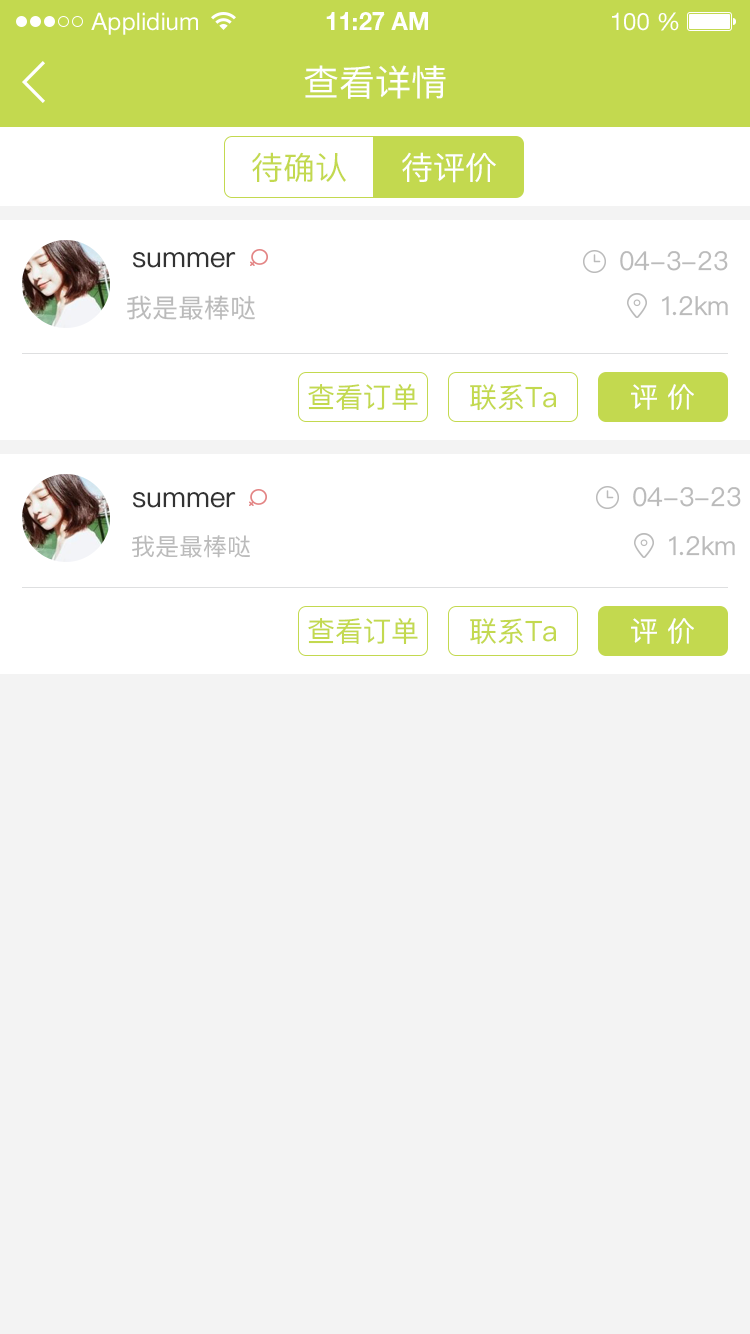
<style>
.page{position:relative;width:750px;height:1334px;background:#f3f3f3}
.page>*{position:absolute;margin:0}
.t1{font:24px "HelveticaNeueLTStd-Roman";color:#ffffff}
.t2{font:24px "HelveticaNeueLTStd-Bd";color:#ffffff}
.t3{font:36px "PingFangSC-Regular";color:#ffffff}
.t4{font:32px "PingFangSC-Regular";color:#c3d94f}
.t5{font:32px "PingFangSC-Regular";color:#ffffff}
.t6{font:28px "PingFangSC-Regular";color:#333333}
.t7{font:26px "PingFangSC-Regular";color:#bbbbbb}
.t8{font:28px "PingFangSC-Regular";color:#c3d94f}
.t9{font:28px "PingFangSC-Regular";color:#ffffff}
.t10{font:24px "PingFangSC-Regular";color:#bbbbbb}
</style>
<div class="page">
<p class="t1" style="left:91px;top:12px;width:107px;height:23px">Applidium</p>
<p class="t2" style="left:326px;top:12px;width:102px;height:18px">11:27 AM</p>
<p class="t1" style="left:612px;top:12px;width:67px;height:19px">100 %</p>
<p class="t3" style="left:304px;top:65px;width:142px;height:34px">查看详情</p>
<p class="t4" style="left:252px;top:152px;width:94px;height:30px">待确认</p>
<p class="t5" style="left:402px;top:152px;width:94px;height:31px">待评价</p>
<p class="t6" style="left:132px;top:252px;width:104px;height:16px">summer</p>
<p class="t7" style="left:620px;top:251px;width:108px;height:20px">04-3-23</p>
<p class="t7" style="left:127px;top:295px;width:128px;height:25px">我是最棒哒</p>
<p class="t7" style="left:662px;top:296px;width:66px;height:20px">1.2km</p>
<p class="t8" style="left:308px;top:383px;width:110px;height:27px">查看订单</p>
<p class="t8" style="left:470px;top:384px;width:86px;height:27px">联系Ta</p>
<p class="t9" style="left:631px;top:384px;width:63px;height:26px">评 价</p>
<p class="t6" style="left:132px;top:492px;width:104px;height:16px">summer</p>
<p class="t7" style="left:633px;top:487px;width:108px;height:20px">04-3-23</p>
<p class="t10" style="left:132px;top:535px;width:118px;height:23px">我是最棒哒</p>
<p class="t7" style="left:669px;top:536px;width:66px;height:20px">1.2km</p>
<p class="t8" style="left:308px;top:617px;width:110px;height:27px">查看订单</p>
<p class="t8" style="left:470px;top:618px;width:86px;height:27px">联系Ta</p>
<p class="t9" style="left:631px;top:618px;width:63px;height:26px">评 价</p>
</div>
